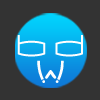
<style>
.page{position:relative;width:100px;height:100px;background:#333333}
.page>*{position:absolute;margin:0}
.t1{font:34.3px "Kameleon";letter-spacing:0.2em;color:#fefefe}
.t2{font:33px "Kharnorric";letter-spacing:0.2em;color:#fefefe}
</style>
<div class="page">
<p class="t1" style="left:17px;top:35px;width:66px;height:22px">bd</p>
<p class="t2" style="left:37px;top:60px;width:27px;height:23px">w</p>
</div>
